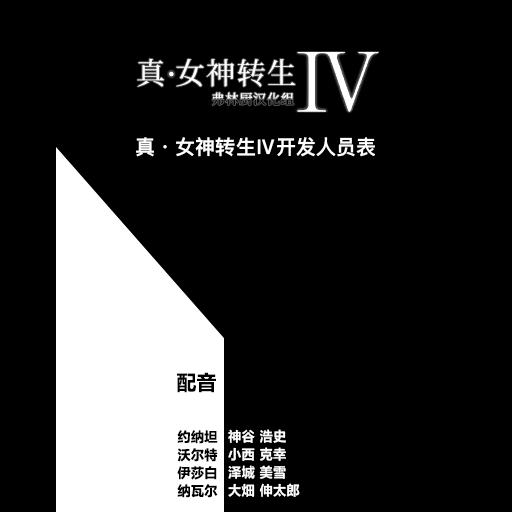
<style>
.page{position:relative;width:512px;height:512px;background:#000000}
.page>*{position:absolute;margin:0}
.t1{font:20.2px "DFKingGothicSC14-Semibold";letter-spacing:0.005em;color:#ffffff}
.t2{font:20.2px "FZLTHProGlobal-Bold";letter-spacing:0.005em;color:#000000}
.t3{font:13.5px/18px "FZLTHProGlobal-Bold";letter-spacing:0.005em;color:#000000}
.t4{font:13.5px/18px "FZLTHProGlobal-Bold";letter-spacing:0.005em;color:#ffffff}
</style>
<div class="page">
<p class="t1" style="left:136px;top:137px;width:239px;height:20px">真·女神转生Ⅳ开发人员表</p>
<p class="t2" style="left:177px;top:372px;width:39px;height:21px">配音</p>
<p class="t3" style="left:177px;top:430px;width:41px;height:68px;text-align:right">约纳坦<br>沃尔特<br>伊莎白<br>纳瓦尔</p>
<p class="t4" style="left:228px;top:429px;width:72px;height:68px">神谷  浩史<br>小西  克幸<br>泽城  美雪<br>大畑  伸太郎</p>
</div>
